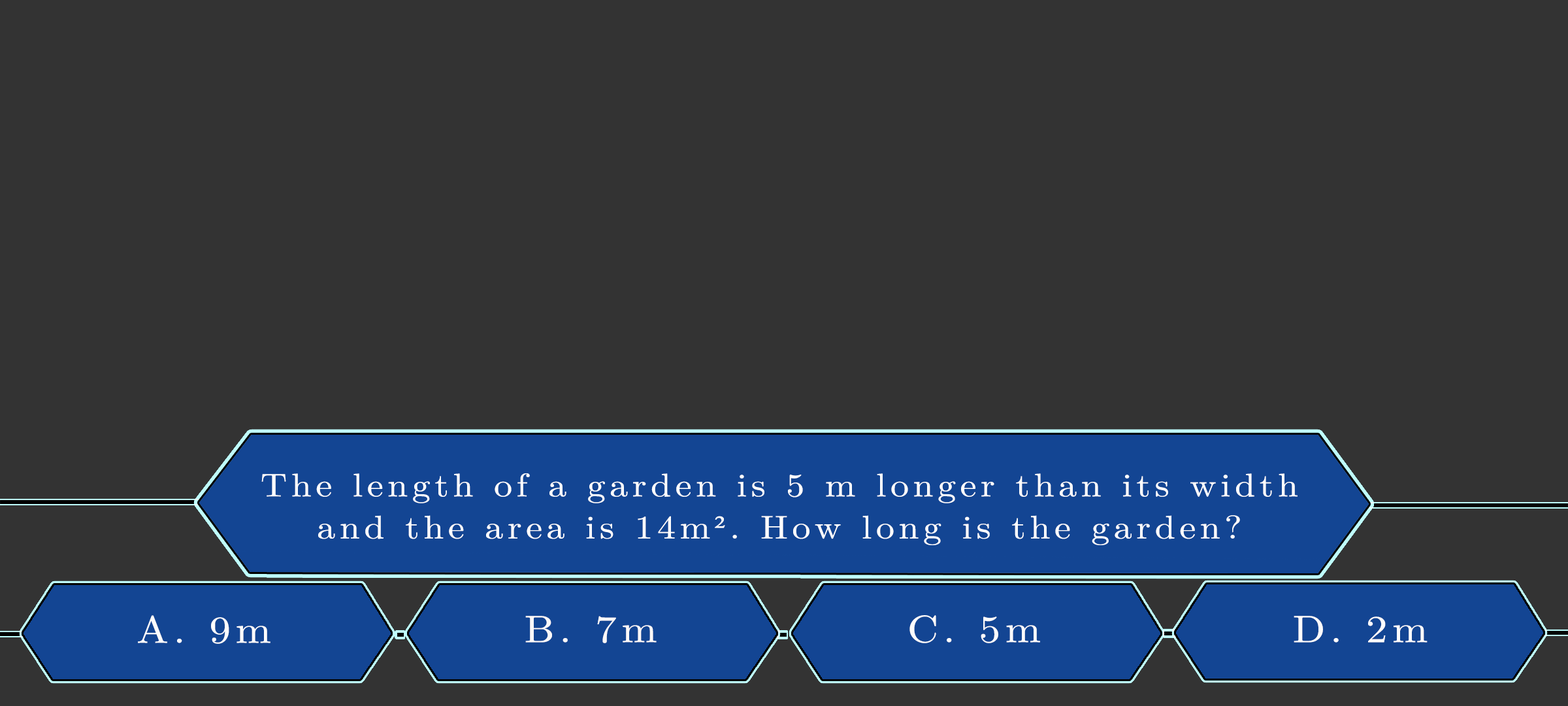
<style>
.page{position:relative;width:1568px;height:706px;background:#333333}
.page>*{position:absolute;margin:0}
.t1{font:32.7px/42px "LatinModernMath-Regular";letter-spacing:0.115em;color:#ffffff;scale:1.12 1}
.t2{font:32.7px/42px "TimesNewRomanPSMT";letter-spacing:0.115em;color:#ffffff;scale:1.12 1}
.t3{font:38.1px "LatinModernMath-Regular";letter-spacing:0.115em;color:#fdfdfd;scale:1.12 1}
.t4{font:38.1px "LatinModernMath-Regular";letter-spacing:0.115em;color:#fcf9f9;scale:1.12 1}
.t5{font:38.1px "LatinModernMath-Regular";letter-spacing:0.115em;color:#fdfcfc;scale:1.12 1}
.t6{font:38.1px "LatinModernMath-Regular";letter-spacing:0.115em;color:#fffdfd;scale:1.12 1}
</style>
<div class="page">
<p class="t1" style="left:261px;top:473px;width:1037px;height:72px;text-align:center">The length of a garden is 5 m longer than its width<br>and the area is 14m<span class="t2">²</span>. How long is the garden?</p>
<p class="t3" style="left:138px;top:615px;width:132px;height:29px">A. 9m</p>
<p class="t4" style="left:525px;top:615px;width:132px;height:28px">B. 7m</p>
<p class="t5" style="left:909px;top:615px;width:131px;height:28px">C. 5m</p>
<p class="t6" style="left:1294px;top:615px;width:134px;height:27px">D. 2m</p>
</div>
